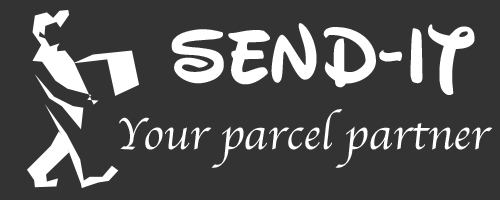
<style>
.page{position:relative;width:500px;height:200px;background:#333333}
.page>*{position:absolute;margin:0}
.t1{font:76px "WaltographUI-Bold";color:#ffffff}
.t2{font:46px "Apple-Chancery";color:#ffffff}
</style>
<div class="page">
<p class="t1" style="left:171px;top:23px;width:304px;height:72px">Send-IT</p>
<p class="t2" style="left:119px;top:109px;width:374px;height:59px">Your parcel partner</p>
</div>
